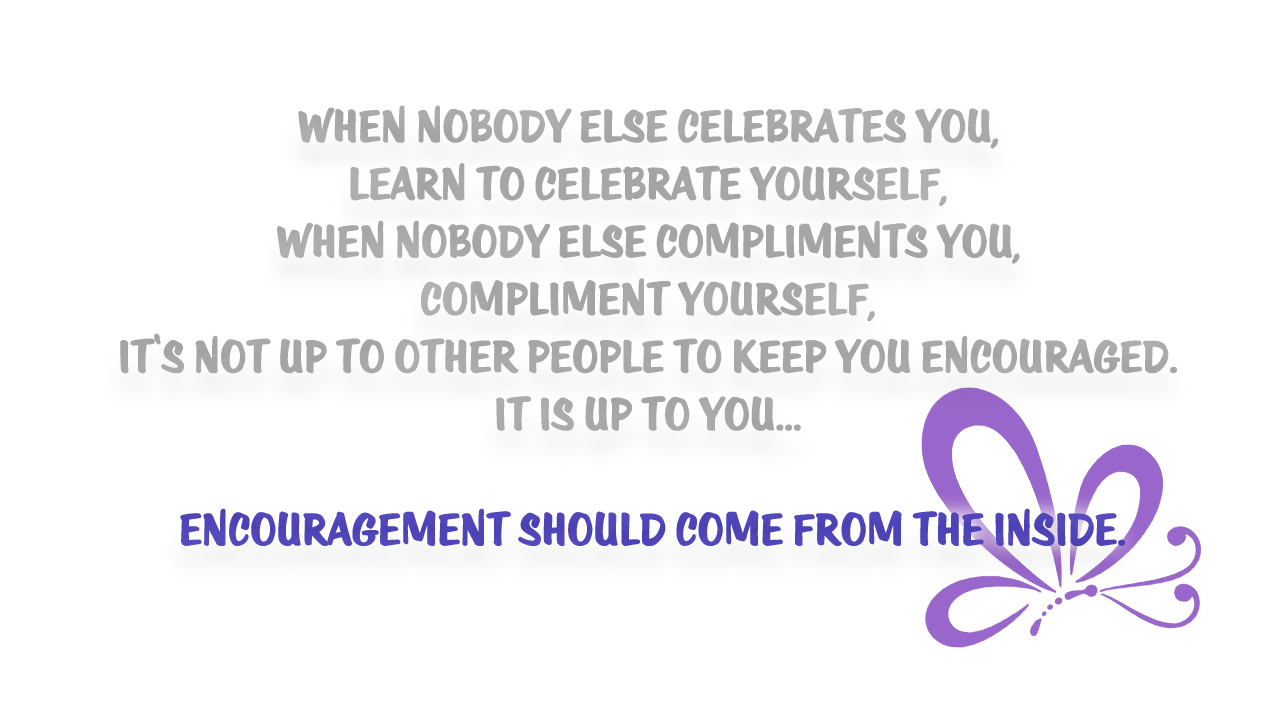
<style>
.page{position:relative;width:1280px;height:720px;background:#ffffff}
.page>*{position:absolute;margin:0}
.t1{font:48px "KTF-Roadstar";letter-spacing:-0.005em;color:#a5a6a9;font-weight:bold}
</style>
<div class="page">
<p class="t1" style="left:120px;top:105px;width:1057px;height:441px;text-align:center">When nobody else celebrates you, <br>learn to celebrate yourself,<br>When nobody else compliments you, <br>compliment yourself,<br>it's not up to other people to keep you encouraged.<br>it is up to you...<br><br> encouragement should come from the inside.</p>
</div>
